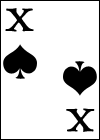
<style>
.page{position:relative;width:100px;height:140px;background:#ffffff}
.page>*{position:absolute;margin:0}
.t1{font:60px "HighTowerText-Reg";color:#000000}
</style>
<div class="page">
<p class="t1" style="left:5px;top:8px;width:29px;height:24px">x</p>
<p class="t1" style="left:66px;top:108px;width:29px;height:24px;rotate:180deg">x</p>
</div>
